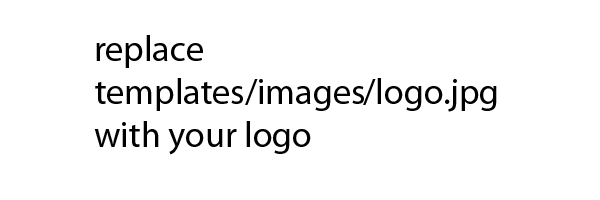
<style>
.page{position:relative;width:600px;height:200px;background:#ffffff}
.page>*{position:absolute;margin:0}
.t1{font:36px "MyriadPro-Regular";color:#000000}
</style>
<div class="page">
<p class="t1" style="left:94px;top:35px;width:403px;height:120px">replace <br>templates/images/logo.jpg<br>with your logo</p>
</div>
